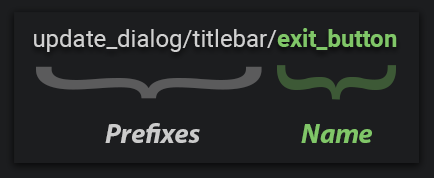
<style>
.page{position:relative;width:434px;height:178px;background:#1c1d1f}
.page>*{position:absolute;margin:0}
.t1{font:24px "Roboto-Regular";color:#d0d0d0}
.t2{font:24px "Roboto-Bold";color:#80c668}
.t3{font:150px "MyriadPro-Regular";color:#3d5936}
.t4{font:282.9px "MyriadPro-Regular";color:#5b5b5c;scale:0.48 1}
.t5{font:28px "MyriadPro-BoldIt";color:#cbcbcb}
.t6{font:28px "MyriadPro-BoldIt";color:#80c668}
</style>
<div class="page">
<p class="t1" style="left:34px;top:28px;width:363px;height:24px">update_dialog/titlebar/<span class="t2">exit_button</span></p>
<p class="t3" style="left:277px;top:65px;width:119px;height:35px;rotate:-90deg">{</p>
<p class="t4" style="left:36px;top:66px;width:226px;height:33px;rotate:-90deg">{</p>
<p class="t5" style="left:105px;top:123px;width:95px;height:20px">Prefixes</p>
<p class="t6" style="left:301px;top:124px;width:71px;height:19px">Name</p>
</div>
